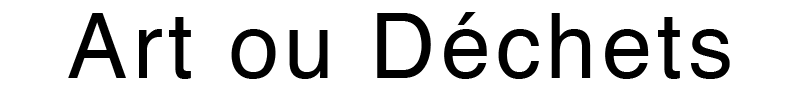
<style>
.page{position:relative;width:800px;height:98px;background:#ffffff}
.page>*{position:absolute;margin:0}
.t1{font:90px "Helvetica";letter-spacing:0.06em;color:#000000}
</style>
<div class="page">
<p class="t1" style="left:68px;top:12px;width:662px;height:67px">Art ou Déchets</p>
</div>
